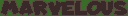
<style>
.page{position:relative;width:128px;height:16px;background:#392929}
.page>*{position:absolute;margin:0}
.t1{font:20.4px "LapsusPro-Bold";color:#392929;scale:1.2 1}
</style>
<div class="page">
<p class="t1" style="left:1px;top:1px;width:126px;height:14px">MARVELOUS</p>
</div>
